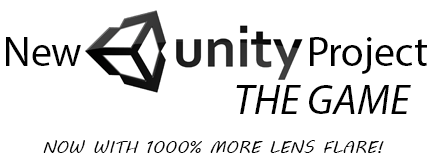
<style>
.page{position:relative;width:432px;height:163px;background:#ffffff}
.page>*{position:absolute;margin:0}
.t1{font:41.7px "MyriadPro-Regular";color:#000000}
.t2{font:41.7px "MyriadPro-It";color:#000000}
.t3{font:17.3px "MVBoli";color:#000000}
</style>
<div class="page">
<p class="t1" style="left:6px;top:37px;width:75px;height:29px">New</p>
<p class="t1" style="left:310px;top:37px;width:117px;height:37px">Project</p>
<p class="t2" style="left:236px;top:85px;width:175px;height:29px">THE GAME</p>
<p class="t3" style="left:43px;top:140px;width:341px;height:13px">NOW WITH 1000% MORE LENS FLARE!</p>
</div>
